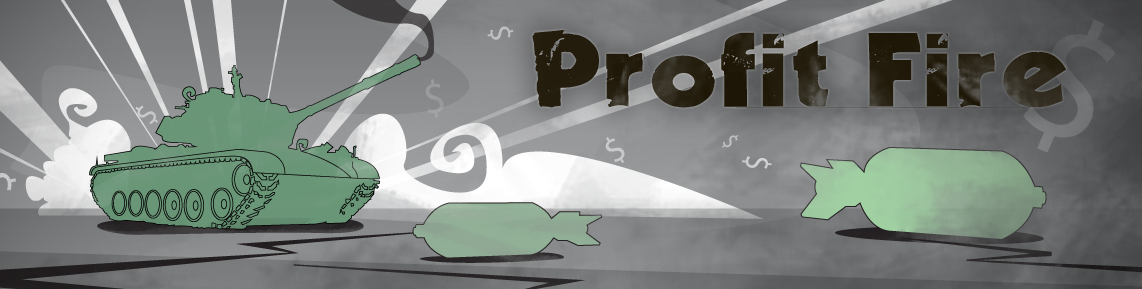
<style>
.page{position:relative;width:1142px;height:289px}
.page>*{position:absolute;margin:0}
.t1{font:90.7px "Decade";color:#241d0e;scale:1.19 1}
</style>
<div class="page">
<p class="t1" style="left:532px;top:30px;width:534px;height:78px">Profit Fire</p>
</div>
